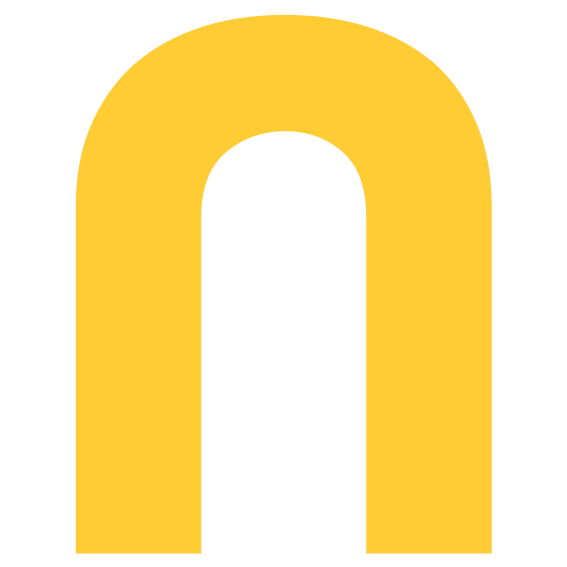
<style>
.page{position:relative;width:567px;height:567px;background:#ffffff}
.page>*{position:absolute;margin:0}
.t1{font:705.1px "GangwonEduPowerExtraBold";color:#ffcc33}
</style>
<div class="page">
<p class="t1" style="left:75px;top:14px;width:417px;height:540px;rotate:180deg">U</p>
</div>
